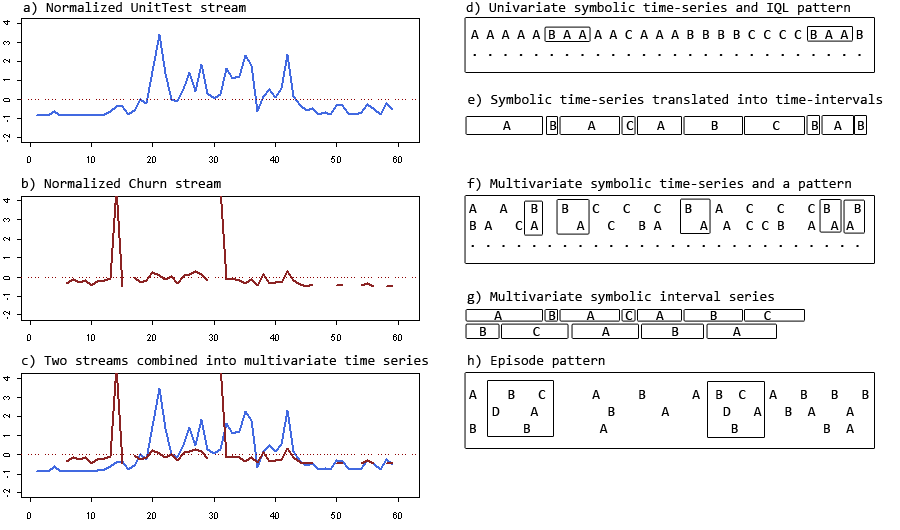
<style>
.page{position:relative;width:900px;height:530px;background:#ffffff}
.page>*{position:absolute;margin:0}
.t1{font:14px "Consolas";color:#000000}
.t2{font:14px "Consolas";color:#ffffff}
</style>
<div class="page">
<p class="t1" style="left:23px;top:2px;width:223px;height:13px">a) Normalized UnitTest stream</p>
<p class="t1" style="left:466px;top:2px;width:384px;height:13px">d) Univariate symbolic time-series and IQL pattern</p>
<p class="t1" style="left:471px;top:30px;width:392px;height:26px">A A A A A B A A A A C A A A B B B B C C C C B A A B <br>. . . . . . . . . . . . . . . . . . . . . . . . . .</p>
<p class="t1" style="left:468px;top:94px;width:415px;height:13px">e) Symbolic time-series translated into time-intervals</p>
<p class="t1" style="left:503px;top:121px;width:361px;height:9px"><span class="t2">     </span>A     B    A    C   A      B       C    B  A  B</p>
<p class="t1" style="left:22px;top:178px;width:199px;height:13px">b) Normalized Churn stream</p>
<p class="t1" style="left:467px;top:178px;width:384px;height:13px">f) Multivariate symbolic time-series and a pattern</p>
<p class="t1" style="left:469px;top:204px;width:392px;height:43px">A   A   B   B   C   C   C   B   A   C   C   C B   B<br>B A   C A     A   C   B A     A  A  C C B   A  A A<br>. . . . . . . . . . . . . . . . . . . . . . . . . .</p>
<p class="t1" style="left:467px;top:291px;width:307px;height:13px">g) Multivariate symbolic interval series</p>
<p class="t1" style="left:480px;top:311px;width:291px;height:25px">A      B    A    C   A      B      C<br>  B      C        A        B       A</p>
<p class="t1" style="left:22px;top:355px;width:406px;height:13px">c) Two streams combined into multivariate time series</p>
<p class="t1" style="left:468px;top:355px;width:137px;height:13px">h) Episode pattern</p>
<p class="t1" style="left:469px;top:390px;width:400px;height:43px">A    B   C      A     B      A  B  C   A   B   B   B<br>   D    A         B      A       D   A   B  A    A  <br>B      B         A                B           B  A</p>
</div>
